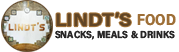
<style>
.page{position:relative;width:179px;height:52px;background:#ffffff}
.page>*{position:absolute;margin:0}
.t1{font:18.3px "AcuminConcept-SemiCondensedBold";color:#604526;text-transform:uppercase;font-weight:bold;scale:1.19 1}
.t2{font:15.8px "AcuminConcept-SemiCondensedBold";color:#9e6f37;font-weight:bold;scale:0.94 1}
.t3{font:10.2px "AcuminConcept-SemiCondensedBold";color:#282727;text-transform:uppercase;font-weight:bold}
</style>
<div class="page">
<p class="t1" style="left:56px;top:12px;width:75px;height:15px">LINDT’S</p>
<p class="t2" style="left:137px;top:14px;width:39px;height:12px">FOOD</p>
<p class="t3" style="left:55px;top:30px;width:120px;height:10px">Snacks, Meals &amp; Drinks</p>
</div>
